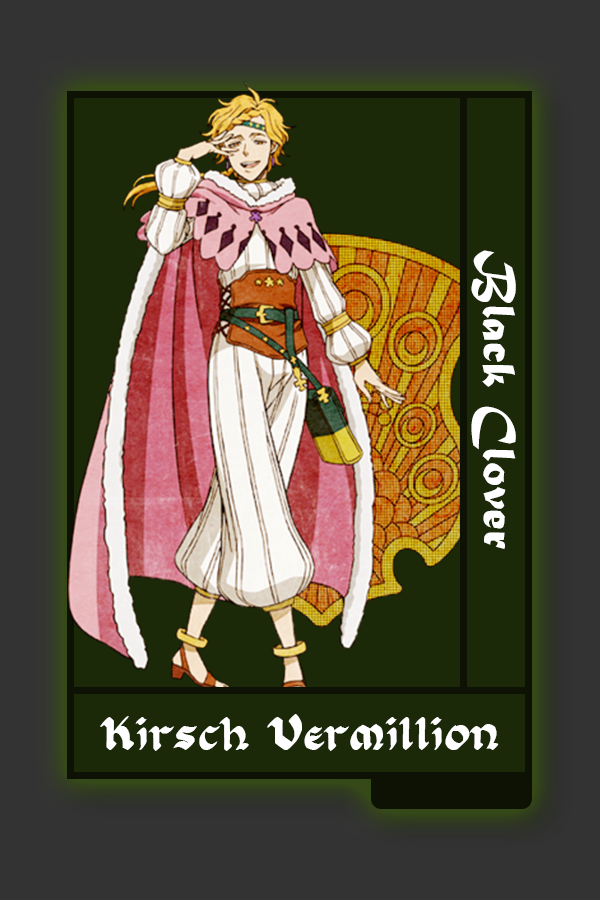
<style>
.page{position:relative;width:600px;height:900px;background:#1b2908}
.page>*{position:absolute;margin:0}
.t1{font:48.8px "MaturaMTScriptCapitals";color:#ffffff}
.t2{font:40px "FloranteatLaura";color:#ffffff}
</style>
<div class="page">
<p class="t1" style="left:471px;top:250px;width:45px;height:299px;rotate:90deg">Black Clover</p>
<p class="t2" style="left:100px;top:714px;width:399px;height:37px">Kirsch Vermillion</p>
</div>
